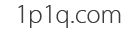
<style>
.page{position:relative;width:137px;height:32px;background:#ffffff}
.page>*{position:absolute;margin:0}
.t1{font:27px "PingHei-Light";color:#3c3c3c}
</style>
<div class="page">
<p class="t1" style="left:18px;top:5px;width:103px;height:23px">1p1q.com</p>
</div>
